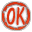
<style>
.page{position:relative;width:32px;height:32px;background:#ffffff}
.page>*{position:absolute;margin:0}
.t1{font:24.4px "HGPGyoshotai";color:#dd3311;font-weight:bold;scale:0.73 1}
</style>
<div class="page">
<p class="t1" style="left:6px;top:7px;width:19px;height:18px">OK</p>
</div>
